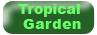
<style>
.page{position:relative;width:97px;height:35px;background:#276027}
.page>*{position:absolute;margin:0}
.t1{font:14px "Arial-Black";color:#66ff66}
</style>
<div class="page">
<p class="t1" style="left:18px;top:2px;width:77px;height:24px">Tropical</p>
<p class="t1" style="left:23px;top:17px;width:58px;height:16px">Garden</p>
</div>
